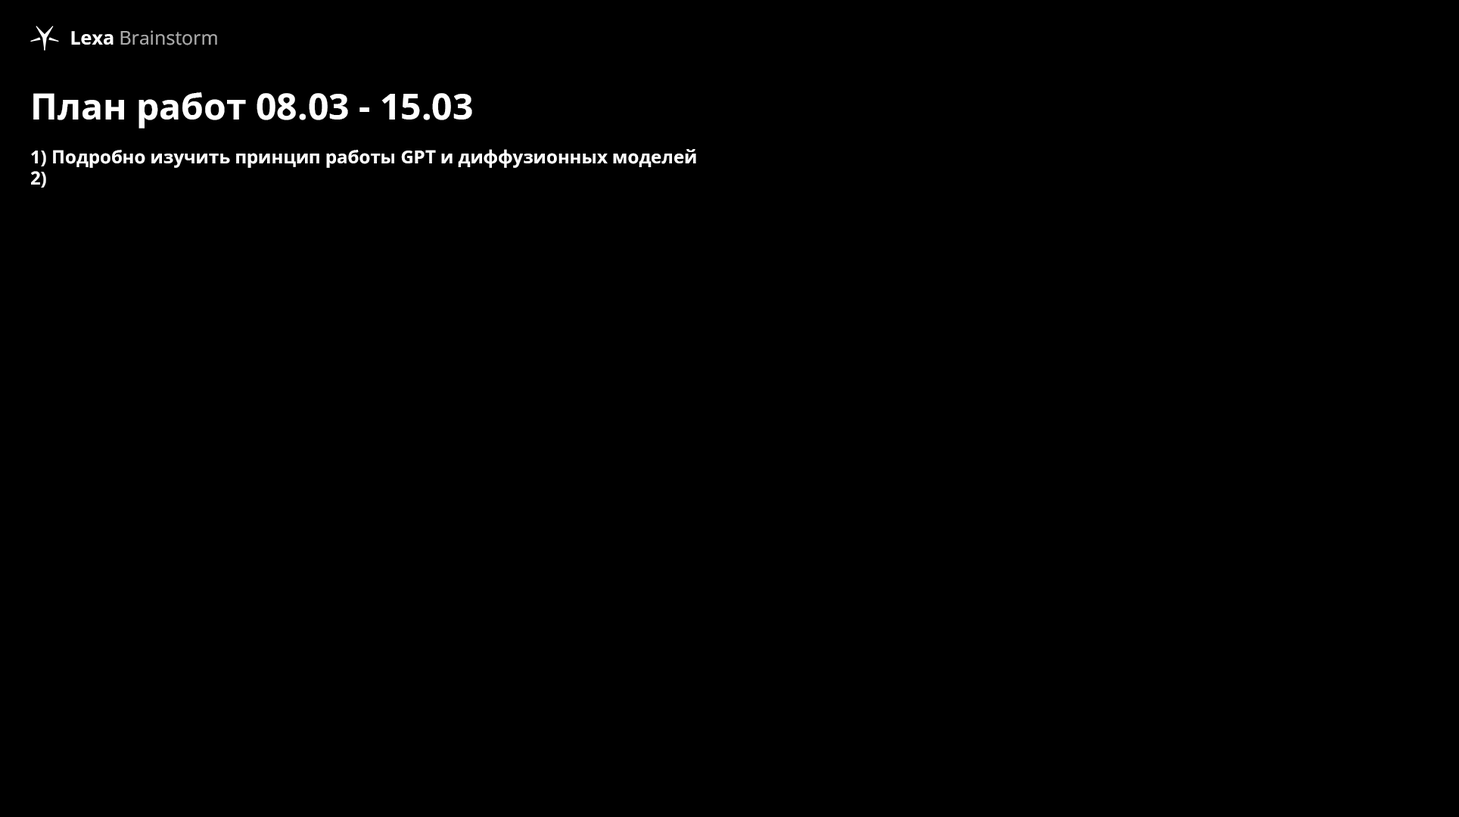
<style>
.page{position:relative;width:1459px;height:817px;background:#000000}
.page>*{position:absolute;margin:0}
.t1{font:18.9px "OpenSans-Regular";color:#aaaaaa}
.t2{font:18.9px "OpenSans-Bold";color:#ffffff}
.t3{font:18.2px "OpenSans-Bold";color:#ffffff}
.t4{font:36.3px "OpenSans-Bold";color:#ffffff}
</style>
<div class="page">
<p class="t1" style="left:71px;top:30px;width:146px;height:15px"><span class="t2">Lexa </span>Brainstorm</p>
<p class="t3" style="left:31px;top:92px;width:665px;height:96px"><span class="t4">План работ 08.03 - 15.03<br></span><br>1) Подробно изучить принцип работы GPT и диффузионных моделей<br>2)</p>
</div>
